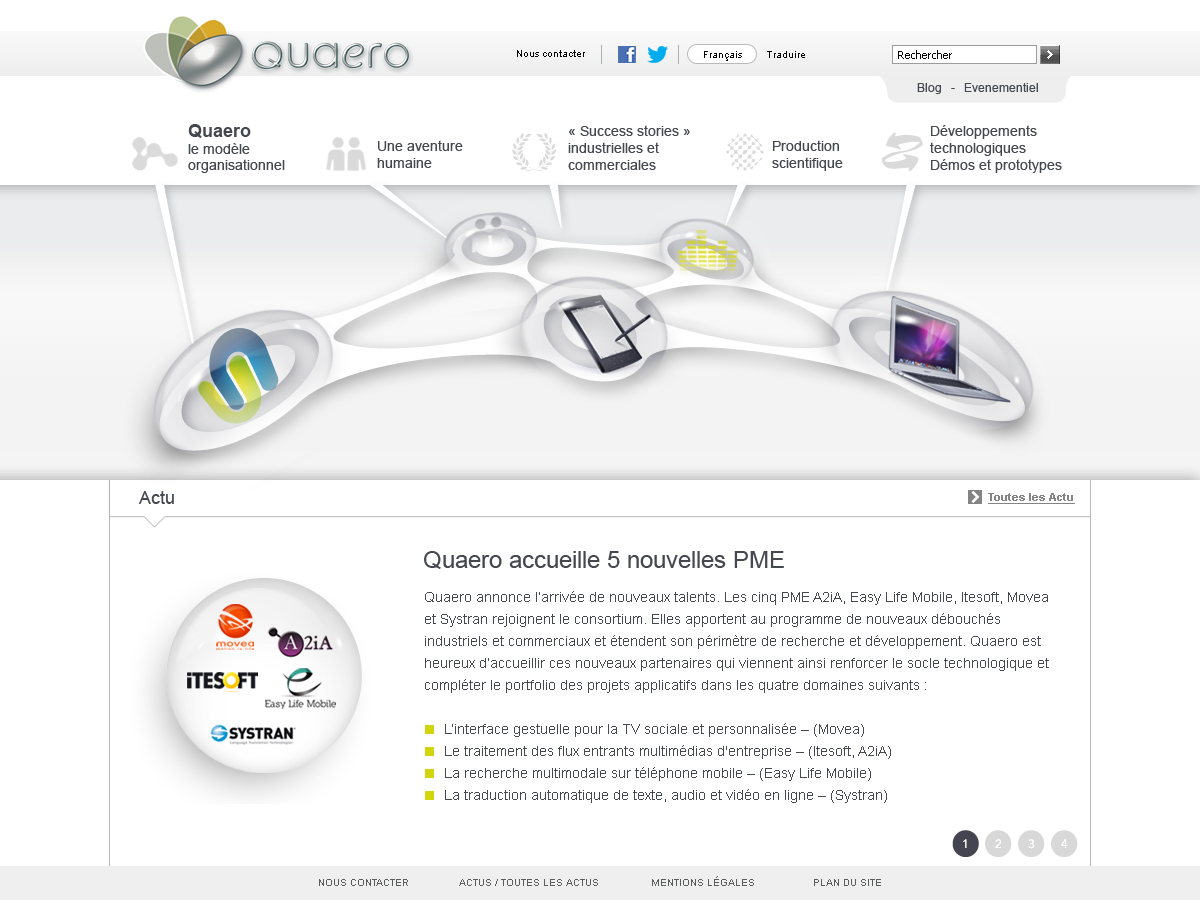
<style>
.page{position:relative;width:1200px;height:900px;background:#ffffff}
.page>*{position:absolute;margin:0}
.t1{font:10px "ArialMT";color:#000000}
.t2{font:12px "ArialMT";color:#45484e}
.t3{font:14px "ArialMT";color:#45484e}
.t4{font:18px "Arial-BoldMT";color:#45484e}
.t5{font:18px "ArialMT";color:#45484e}
.t6{font:11px "Arial-BoldMT";color:#848484;text-decoration:underline}
.t7{font:24px "ArialMT";color:#45484e}
.t8{font:14px/22px "ArialMT";color:#45484e}
.t9{font:10px "Arial-BoldMT";color:#5b5c5c;text-transform:uppercase}
</style>
<div class="page">
<p class="t1" style="left:517px;top:50px;width:68px;height:7px">Nous contacter</p>
<p class="t1" style="left:704px;top:51px;width:101px;height:10px">Français        Traduire</p>
<p class="t2" style="left:917px;top:83px;width:121px;height:11px">Blog   -   Evenementiel</p>
<p class="t3" style="left:188px;top:124px;width:97px;height:49px"><span class="t4">Quaero<br></span>le modèle organisationnel</p>
<p class="t3" style="left:568px;top:125px;width:122px;height:45px">« Success stories »<br>industrielles et commerciales</p>
<p class="t3" style="left:930px;top:125px;width:132px;height:48px">Développements<br>technologiques<br>Démos et prototypes</p>
<p class="t3" style="left:377px;top:140px;width:86px;height:28px">Une aventure humaine</p>
<p class="t3" style="left:772px;top:140px;width:71px;height:31px">Production scientifique</p>
<p class="t5" style="left:138px;top:491px;width:36px;height:13px">Actu</p>
<p class="t6" style="left:988px;top:493px;width:87px;height:11px">Toutes les Actu</p>
<p class="t7" style="left:424px;top:551px;width:360px;height:18px">Quaero accueille 5 nouvelles PME</p>
<p class="t8" style="left:425px;top:591px;width:624px;height:212px">Quaero annonce l’arrivée de nouveaux talents. Les cinq PME A2iA, Easy Life Mobile, Itesoft, Movea et Systran rejoignent le consortium. Elles apportent au programme de nouveaux débouchés industriels et commerciaux et étendent son périmètre de recherche et développement. Quaero est heureux d’accueillir ces nouveaux partenaires qui viennent ainsi renforcer le socle technologique et compléter le portfolio des projets applicatifs dans les quatre domaines suivants :<br><br>L’interface gestuelle pour la TV sociale et personnalisée – (Movea)<br>Le traitement des flux entrants multimédias d'entreprise – (Itesoft, A2iA)<br>La recherche multimodale sur téléphone mobile – (Easy Life Mobile)<br>La traduction automatique de texte, audio et vidéo en ligne – (Systran)</p>
<p class="t9" style="left:319px;top:879px;width:89px;height:7px">NOUS contacter</p>
<p class="t9" style="left:459px;top:879px;width:139px;height:7px">Actus / Toutes les actus</p>
<p class="t9" style="left:652px;top:876px;width:102px;height:10px">Mentions légales</p>
<p class="t9" style="left:814px;top:879px;width:67px;height:7px">Plan du site</p>
</div>
